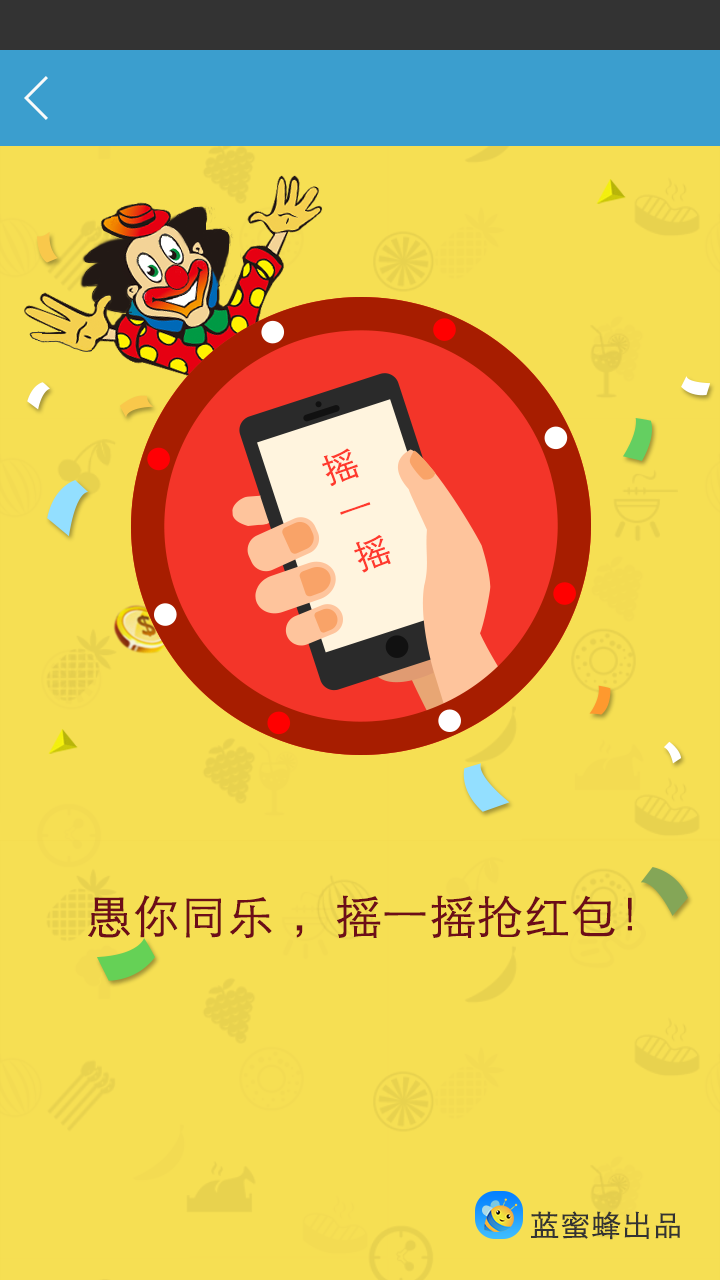
<style>
.page{position:relative;width:720px;height:1280px;background:#f6df53}
.page>*{position:absolute;margin:0}
.t1{font:33.5px "STXihei";color:#ff3a2e;font-weight:bold;scale:1.04 1}
.t2{font:46px "STXihei";color:#6d0d18;font-weight:bold}
.t3{font:30px "STXihei";color:#333333;font-weight:bold}
</style>
<div class="page">
<p class="t1" style="left:322px;top:448px;width:69px;height:125px;rotate:-19deg">摇一摇</p>
<p class="t2" style="left:88px;top:895px;width:544px;height:43px">愚你同乐 ，摇一摇抢红包！</p>
<p class="t3" style="left:531px;top:1211px;width:149px;height:29px">蓝蜜蜂出品</p>
</div>
